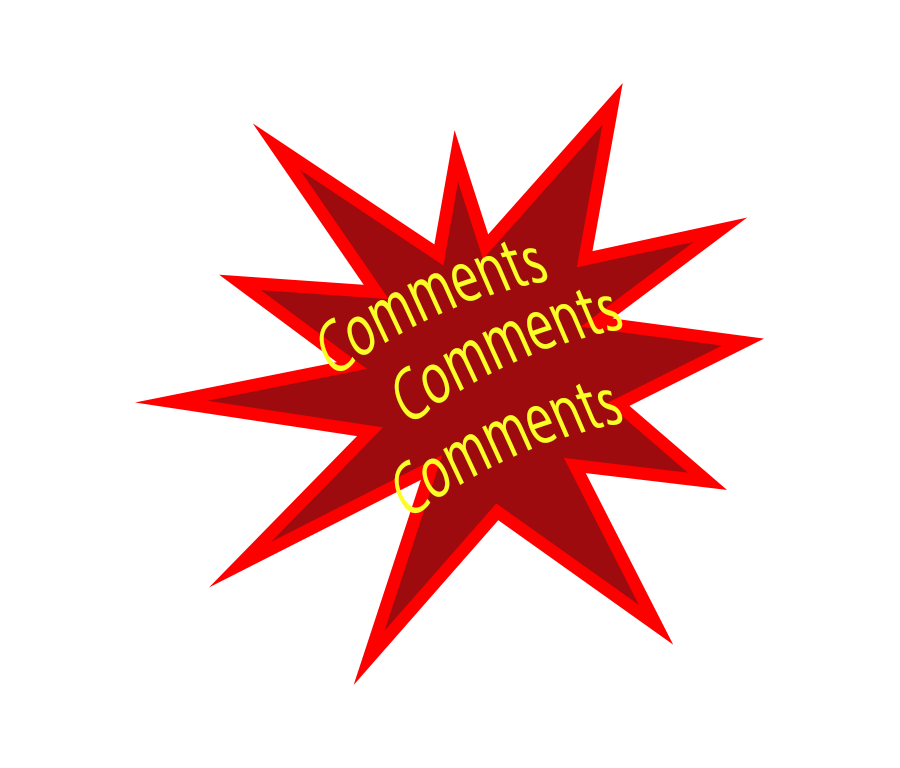
<style>
.page{position:relative;width:900px;height:768px;background:#ffffff}
.page>*{position:absolute;margin:0}
.t1{font:12px "MyriadPro-Regular";color:#fafd27}
</style>
<div class="page">
<p class="t1" style="left:319px;top:241px;width:229px;height:131px;rotate:-24deg">Comments</p>
<p class="t1" style="left:394px;top:289px;width:229px;height:131px;rotate:-24deg">Comments</p>
<p class="t1" style="left:394px;top:383px;width:229px;height:131px;rotate:-24deg">Comments</p>
</div>
